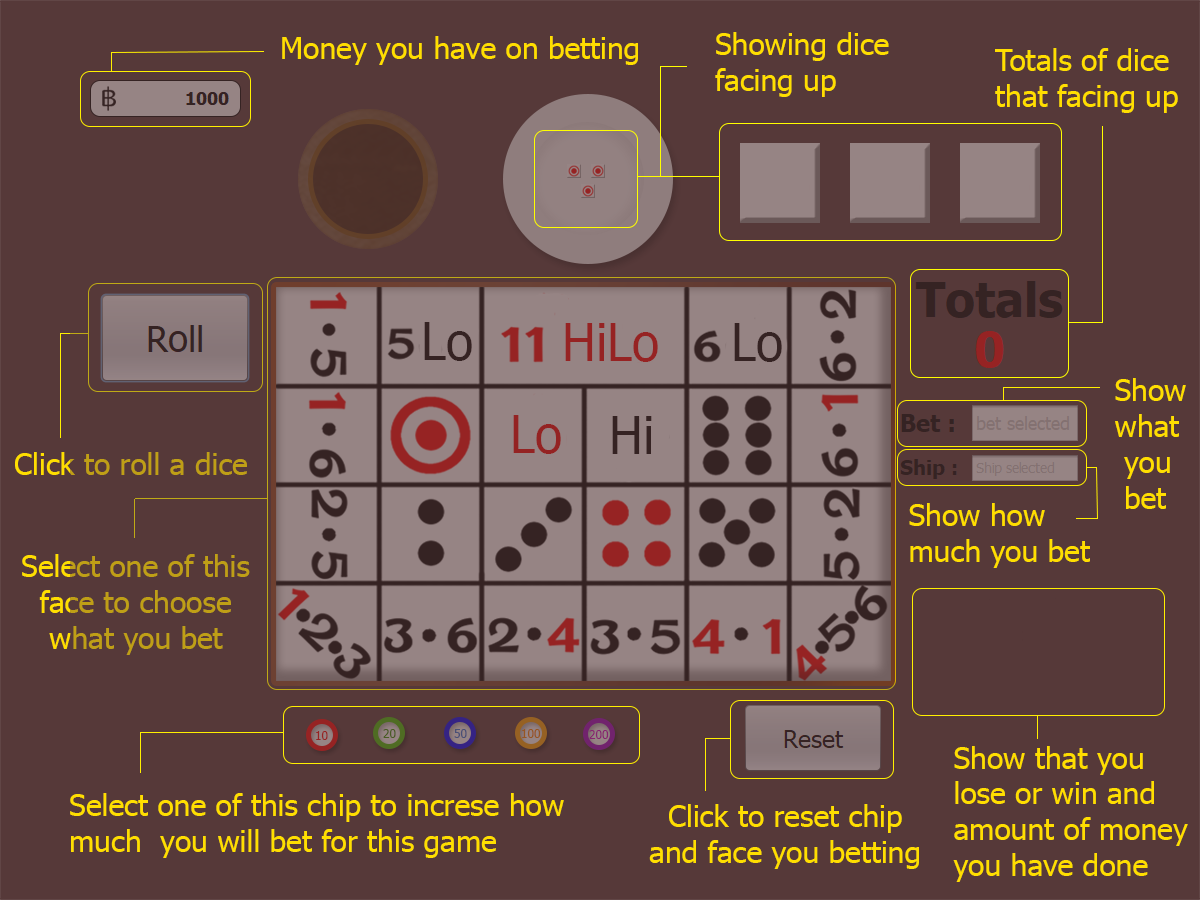
<style>
.page{position:relative;width:1200px;height:900px;background:#563939}
.page>*{position:absolute;margin:0}
.t1{font:30px "Tahoma";color:#ffde00}
.t2{font:30px "Tahoma";color:#bf9f16}
</style>
<div class="page">
<p class="t1" style="left:282px;top:36px;width:356px;height:29px">Money you have on betting</p>
<p class="t1" style="left:715px;top:32px;width:174px;height:65px">Showing dice <br>facing up</p>
<p class="t1" style="left:995px;top:48px;width:183px;height:65px">Totals of dice<br>that facing up</p>
<p class="t1" style="left:1115px;top:378px;width:71px;height:131px">Show<br>what <br> you <br> bet</p>
<p class="t2" style="left:15px;top:452px;width:232px;height:23px">Click to roll a dice</p>
<p class="t1" style="left:909px;top:503px;width:181px;height:65px">Show how <br>much you bet</p>
<p class="t2" style="left:22px;top:554px;width:228px;height:101px">Select one of this<br>  face to choose <br>   what you bet</p>
<p class="t1" style="left:953px;top:746px;width:235px;height:136px">Show that you <br>lose or win and<br>amount of money<br>you have done</p>
<p class="t1" style="left:70px;top:793px;width:494px;height:65px">Select one of this chip to increse how <br>much  you will bet for this game</p>
<p class="t1" style="left:649px;top:804px;width:270px;height:65px">Click to reset chip<br>and face you betting</p>
</div>
